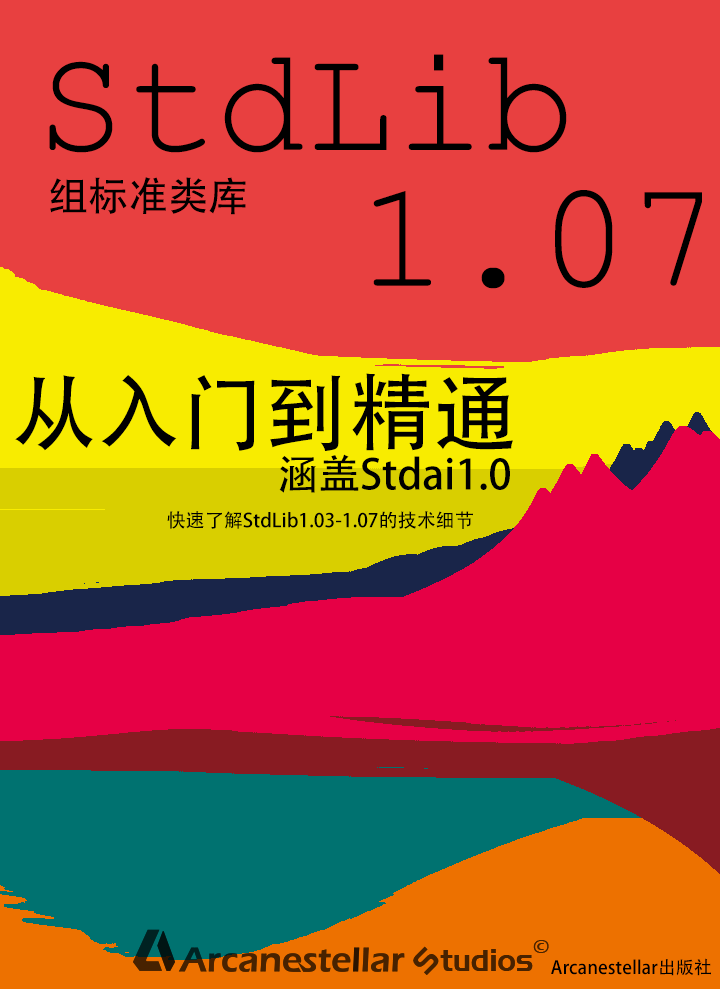
<style>
.page{position:relative;width:720px;height:989px;background:#e84040}
.page>*{position:absolute;margin:0}
.t1{font:150.1px "CourierNewPSMT";color:#000000}
.t2{font:40.1px "AdobeHeitiStd-Regular";color:#000000}
.t3{font:152.2px "CourierNewPSMT";color:#000000}
.t4{font:84.3px "AdobeHeitiStd-Regular";color:#000000}
.t5{font:41.2px "AdobeHeitiStd-Regular";color:#000000}
.t6{font:19.1px "AdobeHeitiStd-Regular";color:#000000}
.t7{font:18px "AdobeHeitiStd-Regular";color:#000000}
</style>
<div class="page">
<p class="t1" style="left:49px;top:54px;width:518px;height:99px">StdLib</p>
<p class="t2" style="left:50px;top:177px;width:196px;height:38px">组标准类库</p>
<p class="t3" style="left:373px;top:190px;width:329px;height:99px">1.07</p>
<p class="t4" style="left:15px;top:373px;width:498px;height:78px">从入门到精通</p>
<p class="t5" style="left:279px;top:454px;width:231px;height:39px">涵盖Stdai1.0</p>
<p class="t6" style="left:167px;top:511px;width:306px;height:18px">快速了解StdLib1.03-1.07的技术细节</p>
<p class="t7" style="left:551px;top:958px;width:160px;height:18px">Arcanestellar出版社</p>
</div>
